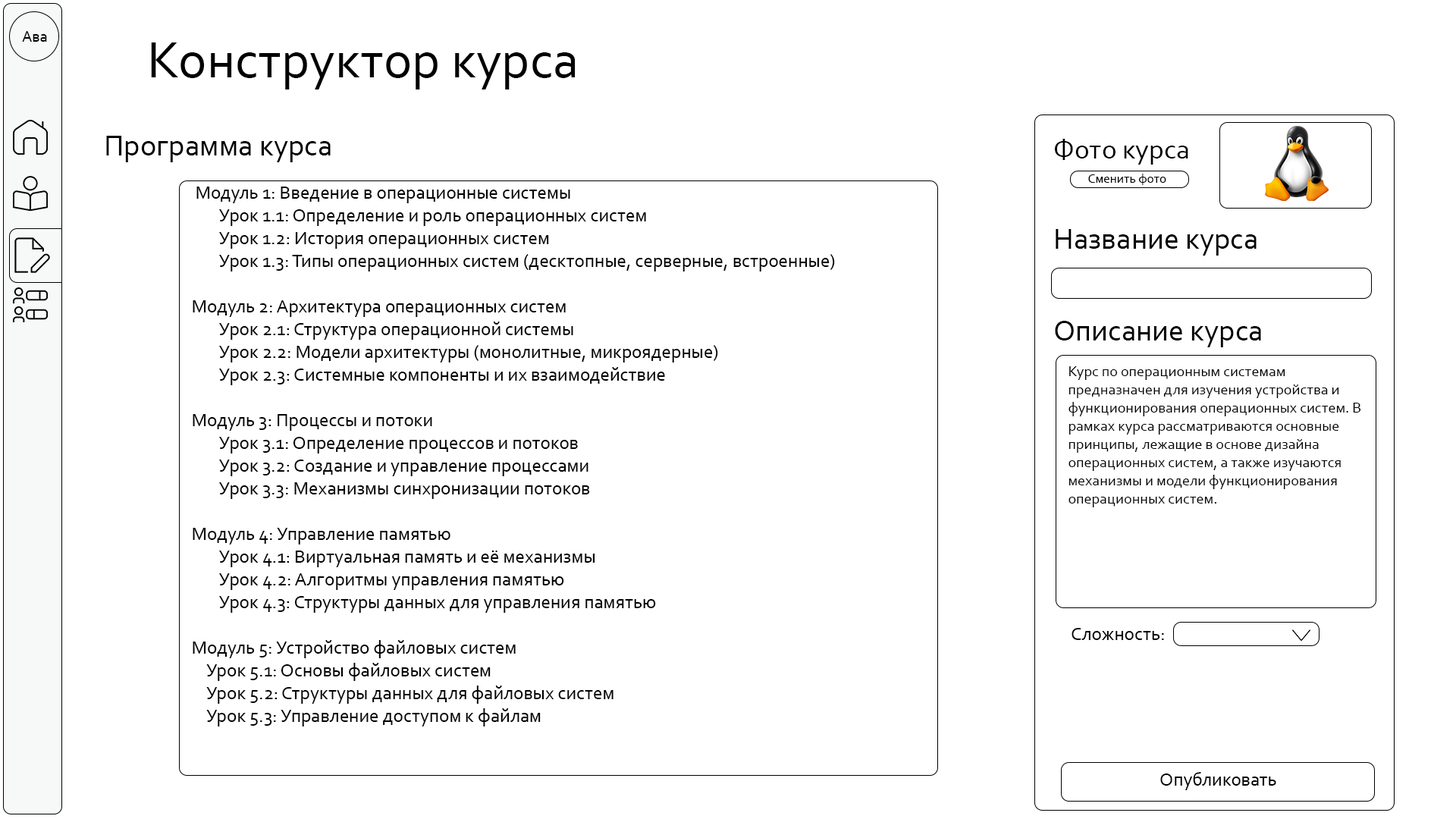
<style>
.page{position:relative;width:1456px;height:819px;background:#ffffff}
.page>*{position:absolute;margin:0}
.t1{font:15.9px "Corbel";color:#000000}
.t2{font:53.1px "Corbel";color:#000000}
.t3{font:30.3px "Corbel";color:#000000}
.t4{font:28.1px "Corbel";color:#000000}
.t5{font:12.9px "Corbel";color:#000000}
.t6{font:19px "Corbel";color:#000000}
.t7{font:15.2px "Corbel";color:#000000}
</style>
<div class="page">
<p class="t1" style="left:22px;top:31px;width:25px;height:11px">Ава</p>
<p class="t2" style="left:151px;top:42px;width:425px;height:47px">Конструктор курса</p>
<p class="t3" style="left:106px;top:136px;width:225px;height:26px">Программа курса</p>
<p class="t4" style="left:1055px;top:139px;width:133px;height:26px">Фото курса</p>
<p class="t5" style="left:1088px;top:174px;width:78px;height:11px">Сменить фото</p>
<p class="t6" style="left:193px;top:187px;width:642px;height:539px">Модуль 1: Введение в операционные системы<br>  Урок 1.1: Определение и роль операционных систем<br> Урок 1.2: История операционных систем<br> Урок 1.3: Типы операционных систем (десктопные, серверные, встроенные)<br><br>Модуль 2: Архитектура операционных систем<br> Урок 2.1: Структура операционной системы<br> Урок 2.2: Модели архитектуры (монолитные, микроядерные)<br> Урок 2.3: Системные компоненты и их взаимодействие<br><br>Модуль 3: Процессы и потоки<br> Урок 3.1: Определение процессов и потоков<br> Урок 3.2: Создание и управление процессами<br> Урок 3.3: Механизмы синхронизации потоков<br><br>Модуль 4: Управление памятью<br> Урок 4.1: Виртуальная память и её механизмы<br> Урок 4.2: Алгоритмы управления памятью<br> Урок 4.3: Структуры данных для управления памятью<br><br>Модуль 5: Устройство файловых систем<br>    Урок 5.1: Основы файловых систем<br>    Урок 5.2: Структуры данных для файловых систем<br>    Урок 5.3: Управление доступом к файлам</p>
<p class="t3" style="left:1056px;top:229px;width:201px;height:27px">Название курса</p>
<p class="t3" style="left:1055px;top:321px;width:206px;height:26px">Описание курса</p>
<p class="t7" style="left:1068px;top:366px;width:293px;height:141px">Курс по операционным системам предназначен для изучения устройства и функционирования операционных систем. В рамках курса рассматриваются основные принципы, лежащие в основе дизайна операционных систем, а также изучаются механизмы и модели функционирования операционных систем.</p>
<p class="t6" style="left:1072px;top:628px;width:92px;height:12px">Сложность:</p>
<p class="t6" style="left:1160px;top:772px;width:116px;height:18px">Опубликовать</p>
</div>
